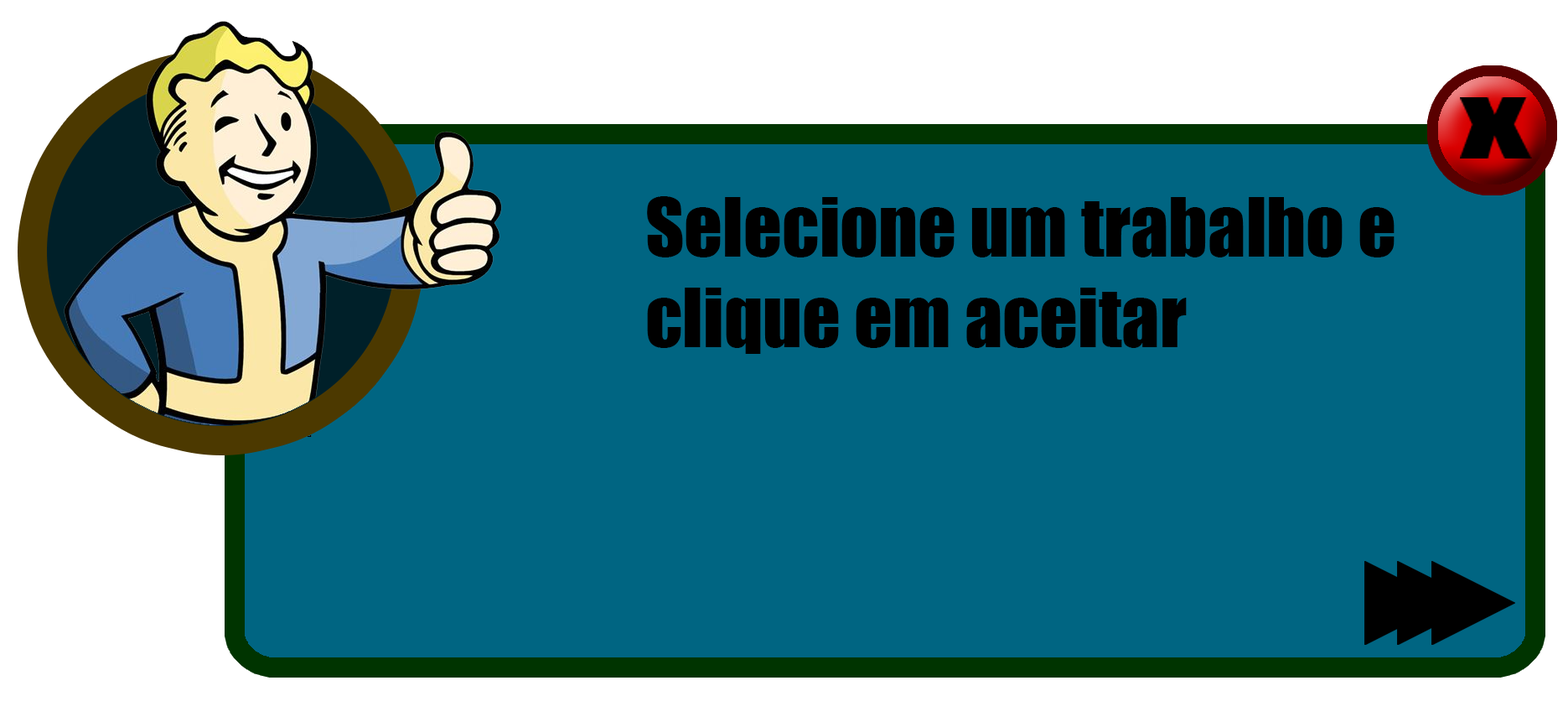
<style>
.page{position:relative;width:1568px;height:722px;background:#006582}
.page>*{position:absolute;margin:0}
.t1{font:75.4px "Impact";color:#000000}
</style>
<div class="page">
<p class="t1" style="left:647px;top:196px;width:748px;height:158px">Selecione um trabalho e<br>clique em aceitar</p>
</div>
